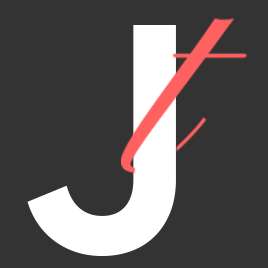
<style>
.page{position:relative;width:268px;height:268px;background:#333333}
.page>*{position:absolute;margin:0}
.t1{font:315.2px "ProductSans-Bold";color:#ffffff}
</style>
<div class="page">
<p class="t1" style="left:27px;top:25px;width:149px;height:231px">J</p>
</div>
